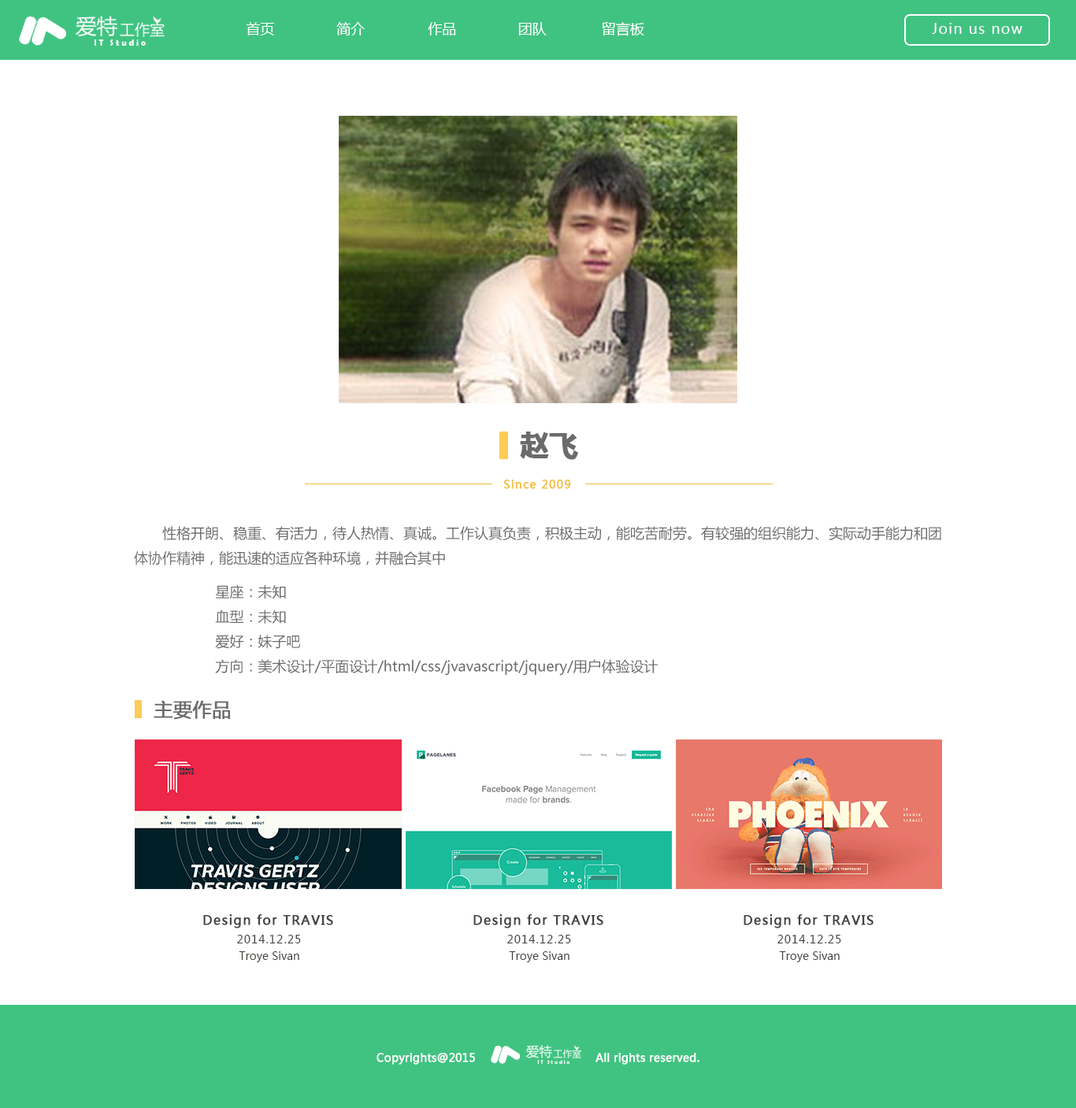
<style>
.page{position:relative;width:1076px;height:1108px;background:#ffffff}
.page>*{position:absolute;margin:0}
.t1{font:14.2px "MicrosoftYaHei";color:#ffffff}
.t2{font:14.2px "MicrosoftYaHei";letter-spacing:0.075em;color:#fff4ff}
.t3{font:8.8px "BerlinSansFBDemi-Bold";color:#ffffff}
.t4{font:28.4px "MicrosoftYaHei-Bold";color:#6c6b6b;font-weight:bold}
.t5{font:11px "MicrosoftYaHei";letter-spacing:0.075em;color:#f4bc39;font-weight:bold}
.t6{font:14.2px "MicrosoftYaHei";color:#6c6b6b}
.t7{font:18.9px "MicrosoftYaHei";color:#6c6b6b;font-weight:bold}
.t8{font:12.6px "MicrosoftYaHei";letter-spacing:0.075em;color:#45413f;font-weight:bold}
.t9{font:11px "MicrosoftYaHei";letter-spacing:0.075em;color:#45413f}
.t10{font:11px "MicrosoftYaHei";color:#43413c}
.t11{font:11px "MicrosoftYaHei";color:#ffffff;font-weight:bold}
.t12{font:5.6px "BerlinSansFBDemi-Bold";color:#ffffff}
</style>
<div class="page">
<p class="t1" style="left:246px;top:22px;width:28px;height:13px">首页</p>
<p class="t1" style="left:336px;top:22px;width:29px;height:13px">简介</p>
<p class="t1" style="left:428px;top:22px;width:28px;height:13px">作品</p>
<p class="t1" style="left:518px;top:22px;width:29px;height:13px">团队</p>
<p class="t1" style="left:602px;top:22px;width:42px;height:14px">留言板</p>
<p class="t2" style="left:932px;top:23px;width:90px;height:11px">Join us now</p>
<p class="t3" style="left:95px;top:39px;width:51px;height:7px">I T   S t u d i o</p>
<p class="t4" style="left:520px;top:432px;width:58px;height:28px">赵飞</p>
<p class="t5" style="left:504px;top:480px;width:67px;height:9px">Since 2009</p>
<p class="t6" style="left:134px;top:526px;width:807px;height:40px">性格开朗、稳重、有活力，待人热情、真诚。工作认真负责，积极主动，能吃苦耐劳。有较强的组织能力、实际动手能力和团体协作精神，能迅速的适应各种环境，并融合其中</p>
<p class="t6" style="left:215px;top:584px;width:443px;height:92px">星座：未知<br>血型：未知<br>爱好：妹子吧<br>方向：美术设计/平面设计/html/css/jvavascript/jquery/用户体验设计</p>
<p class="t7" style="left:154px;top:700px;width:76px;height:20px">主要作品</p>
<p class="t8" style="left:203px;top:914px;width:130px;height:15px">Design for TRAVIS</p>
<p class="t8" style="left:473px;top:914px;width:130px;height:15px">Design for TRAVIS</p>
<p class="t8" style="left:744px;top:914px;width:130px;height:15px">Design for TRAVIS</p>
<p class="t9" style="left:237px;top:935px;width:64px;height:9px">2014.12.25</p>
<p class="t9" style="left:507px;top:935px;width:64px;height:9px">2014.12.25</p>
<p class="t9" style="left:777px;top:935px;width:64px;height:9px">2014.12.25</p>
<p class="t10" style="left:239px;top:952px;width:60px;height:11px">Troye Sivan</p>
<p class="t10" style="left:509px;top:952px;width:60px;height:11px">Troye Sivan</p>
<p class="t10" style="left:779px;top:952px;width:61px;height:11px">Troye Sivan</p>
<p class="t11" style="left:377px;top:1053px;width:98px;height:12px">Copyrights@2015</p>
<p class="t12" style="left:537px;top:1060px;width:32px;height:4px">I T   S t u d i o</p>
<p class="t11" style="left:595px;top:1053px;width:104px;height:12px">All rights reserved.</p>
</div>
